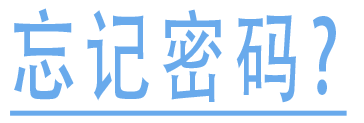
<style>
.page{position:relative;width:364px;height:123px;background:#ffffff}
.page>*{position:absolute;margin:0}
.t1{font:100px "AdobeHeitiStd-Regular";letter-spacing:0.12em;color:#69aaec;text-decoration:underline;scale:0.67 1}
</style>
<div class="page">
<p class="t1" style="left:10px;top:8px;width:337px;height:108px">忘记密码?</p>
</div>
